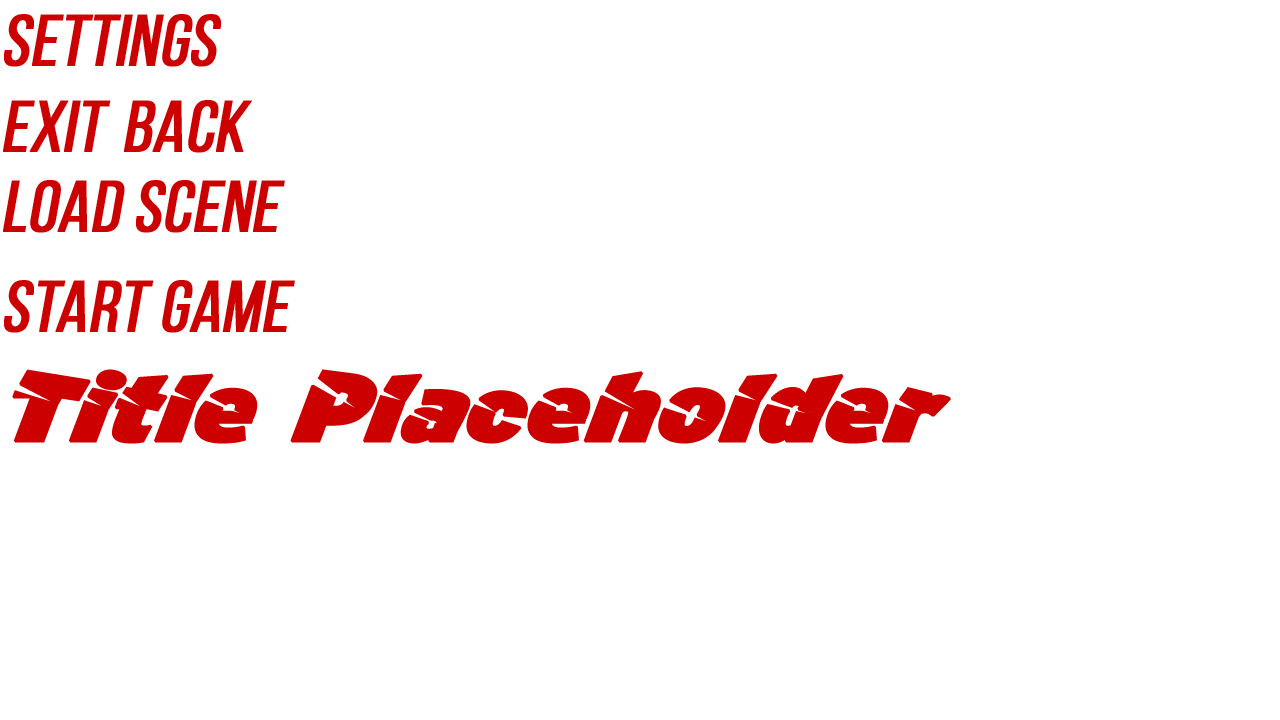
<style>
.page{position:relative;width:1280px;height:720px;background:#ffffff}
.page>*{position:absolute;margin:0}
.t1{font:72px "BebasNeueRegular";color:#cd0000;font-weight:bold;font-style:italic}
.t2{font:102px "A-Cuchillada";color:#cd0000;font-weight:bold;font-style:italic}
</style>
<div class="page">
<p class="t1" style="left:4px;top:14px;width:217px;height:53px">Settings</p>
<p class="t1" style="left:3px;top:100px;width:108px;height:52px">Exit</p>
<p class="t1" style="left:124px;top:100px;width:128px;height:53px">Back</p>
<p class="t1" style="left:3px;top:180px;width:282px;height:53px">Load Scene</p>
<p class="t1" style="left:4px;top:280px;width:291px;height:53px">Start Game</p>
<p class="t2" style="left:12px;top:369px;width:939px;height:75px">Title Placeholder</p>
</div>
